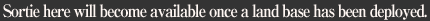
<style>
.page{position:relative;width:430px;height:21px;background:#333333}
.page>*{position:absolute;margin:0}
.t1{font:17px "RyuminPro-ExBold";letter-spacing:-0.08em;color:#fff7f3;scale:0.9 1}
</style>
<div class="page">
<p class="t1" style="left:3px;top:4px;width:424px;height:16px">Sortie here will become available once a land base has been deployed.</p>
</div>
